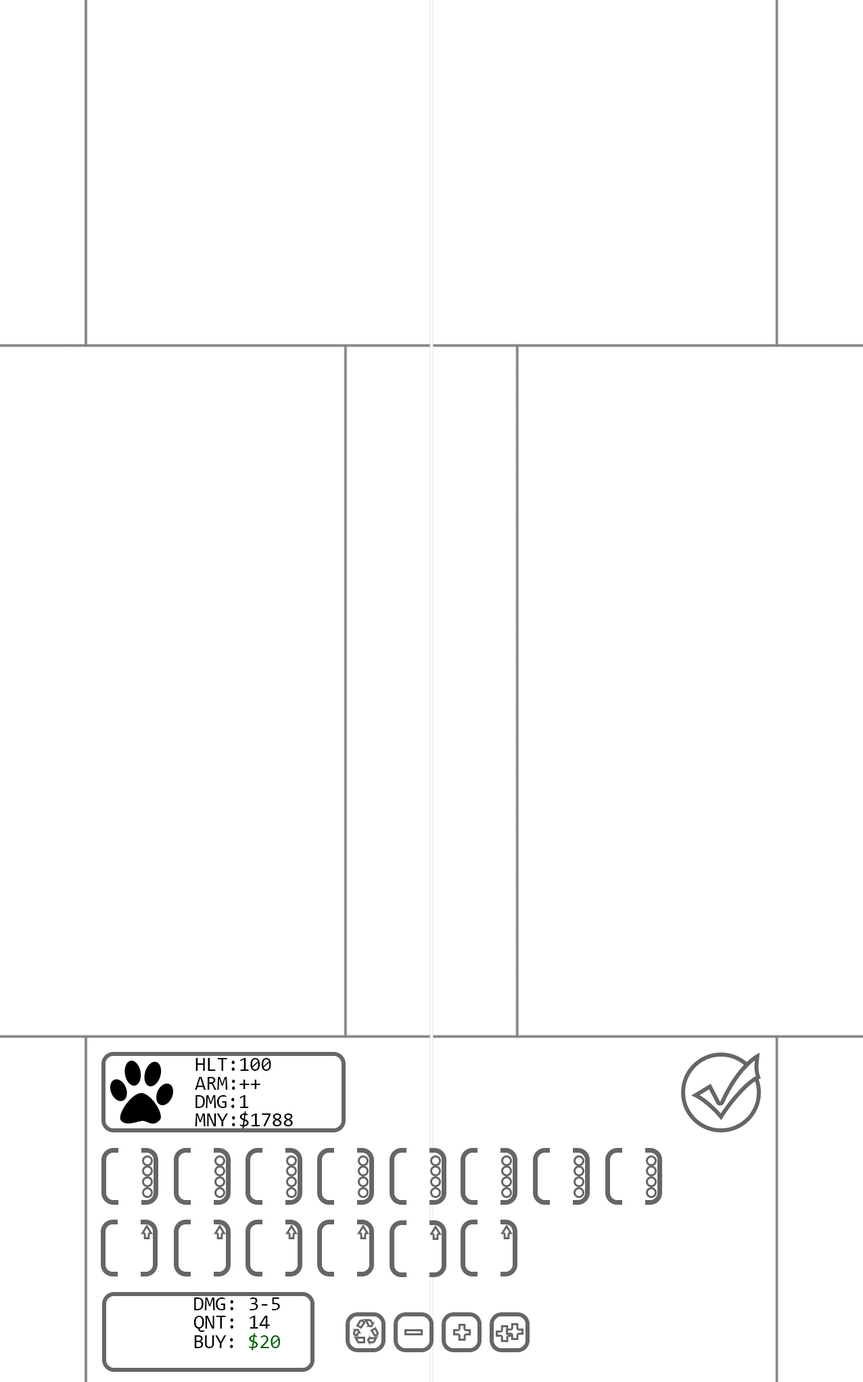
<style>
.page{position:relative;width:863px;height:1382px;background:#ffffff}
.page>*{position:absolute;margin:0}
.t1{font:20px "Consolas";color:#000000}
.t2{font:20px "Consolas";color:#006600}
</style>
<div class="page">
<p class="t1" style="left:195px;top:1058px;width:76px;height:13px">HLT:100</p>
<p class="t1" style="left:195px;top:1077px;width:65px;height:13px">ARM:++</p>
<p class="t1" style="left:195px;top:1095px;width:54px;height:13px">DMG:1</p>
<p class="t1" style="left:195px;top:1111px;width:98px;height:17px">MNY:$1788</p>
<p class="t1" style="left:194px;top:1297px;width:86px;height:13px">DMG: 3-5</p>
<p class="t1" style="left:193px;top:1315px;width:77px;height:17px">QNT: 14</p>
<p class="t1" style="left:194px;top:1333px;width:87px;height:17px">BUY: <span class="t2">$20</span></p>
</div>
